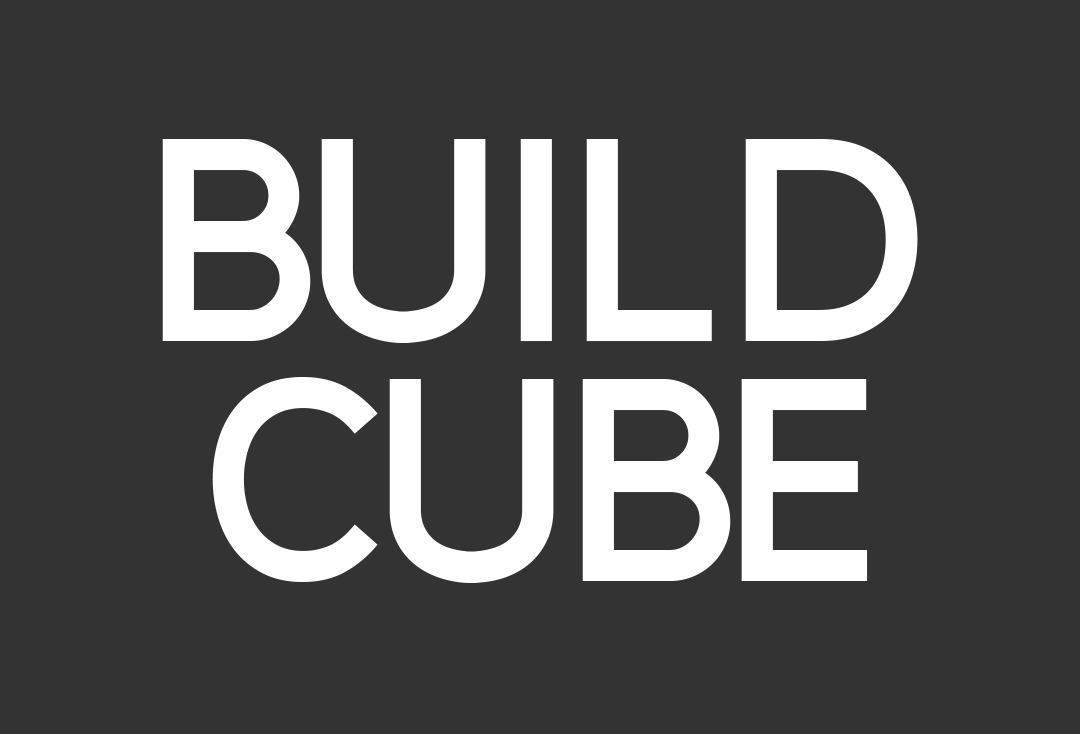
<style>
.page{position:relative;width:1080px;height:734px;background:#333333}
.page>*{position:absolute;margin:0}
.t1{font:288.4px "BerlinBold";letter-spacing:0.08em;color:#ffffff}
.t2{font:288.4px "BerlinBold";color:#ffffff}
.t3{font:288.4px "BerlinBold";letter-spacing:0.06em;color:#ffffff}
</style>
<div class="page">
<p class="t1" style="left:162px;top:139px;width:756px;height:204px"><span class="t2">B</span>UIL<span class="t2">D</span></p>
<p class="t2" style="left:212px;top:377px;width:656px;height:206px">C<span class="t3">U</span>BE</p>
</div>
